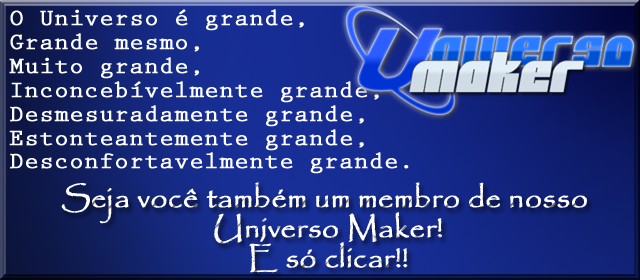
<style>
.page{position:relative;width:640px;height:280px}
.page>*{position:absolute;margin:0}
.t1{font:23.9px/23.9px "PrestigeEliteStd-Bd";color:#ffffff;font-weight:bold}
.t2{font:29.9px/29.9px "Papyrus-Regular";color:#ffffff;font-weight:bold}
</style>
<div class="page">
<p class="t1" style="left:9px;top:9px;width:400px;height:165px">O Universo é grande,<br>Grande mesmo,<br>Muito grande,<br>Inconcebívelmente grande,<br>Desmesuradamente grande,<br>Estonteantemente grande, <br>Desconfortavelmente grande.</p>
<p class="t2" style="left:61px;top:182px;width:526px;height:91px;text-align:center">Seja você também um membro de nosso <br>Universo Maker!<br>É só clicar!!</p>
</div>
